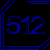
<style>
.page{position:relative;width:50px;height:50px;background:#000000}
.page>*{position:absolute;margin:0}
.t1{font:20.8px "ABitEmpty";color:#000099}
</style>
<div class="page">
<p class="t1" style="left:6px;top:16px;width:39px;height:18px">512</p>
</div>
